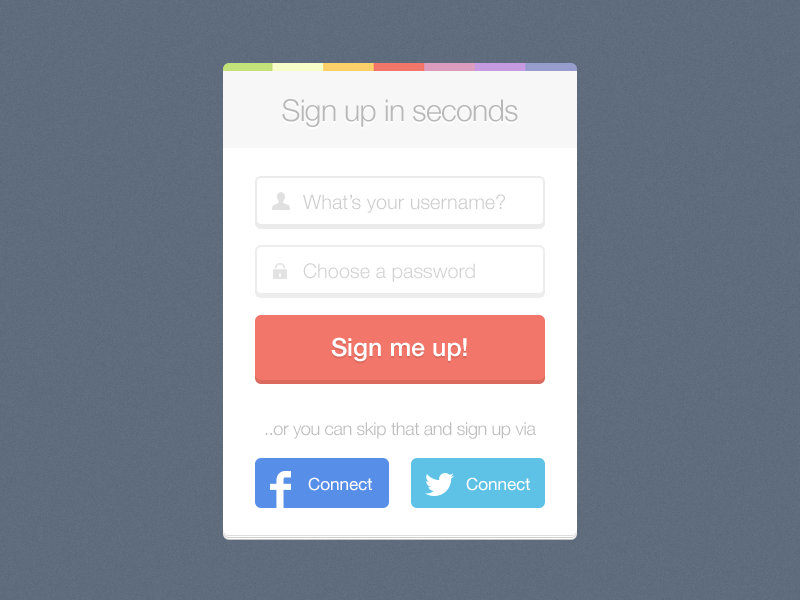
<style>
.page{position:relative;width:800px;height:600px}
.page>*{position:absolute;margin:0}
.t1{font:30px "HelveticaNeue-Light";letter-spacing:-0.02em;color:#b8b8b8}
.t2{font:20px "HelveticaNeue-Light";color:#cccccc}
.t3{font:25px "HelveticaNeue-Medium";color:#ffffff}
.t4{font:18px "HelveticaNeue-Light";letter-spacing:-0.02em;color:#bdbdbd}
.t5{font:17px "HelveticaNeue";color:#ffffff}
</style>
<div class="page">
<p class="t1" style="left:282px;top:99px;width:236px;height:28px">Sign up in seconds</p>
<p class="t2" style="left:303px;top:194px;width:202px;height:19px">What’s your username?</p>
<p class="t2" style="left:303px;top:263px;width:172px;height:19px">Choose a password</p>
<p class="t3" style="left:331px;top:337px;width:136px;height:25px">Sign me up!</p>
<p class="t4" style="left:265px;top:422px;width:271px;height:17px">..or you can skip that and sign up via</p>
<p class="t5" style="left:308px;top:477px;width:64px;height:14px">Connect</p>
<p class="t5" style="left:466px;top:477px;width:64px;height:14px">Connect</p>
</div>
